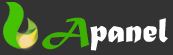
<style>
.page{position:relative;width:173px;height:55px;background:#333333}
.page>*{position:absolute;margin:0}
.t1{font:36px "MaturaMTScriptCapitals";color:#ffffff}
.t2{font:36px "MaturaMTScriptCapitals";color:#3eb002}
</style>
<div class="page">
<p class="t1" style="left:42px;top:17px;width:126px;height:34px"><span class="t2">A</span>panel</p>
</div>
